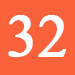
<style>
.page{position:relative;width:75px;height:75px;background:#fa623c}
.page>*{position:absolute;margin:0}
.t1{font:60px "TimesNewRomanPSMT";color:#ffffff;font-weight:bold}
</style>
<div class="page">
<p class="t1" style="left:8px;top:15px;width:58px;height:42px">32</p>
</div>
